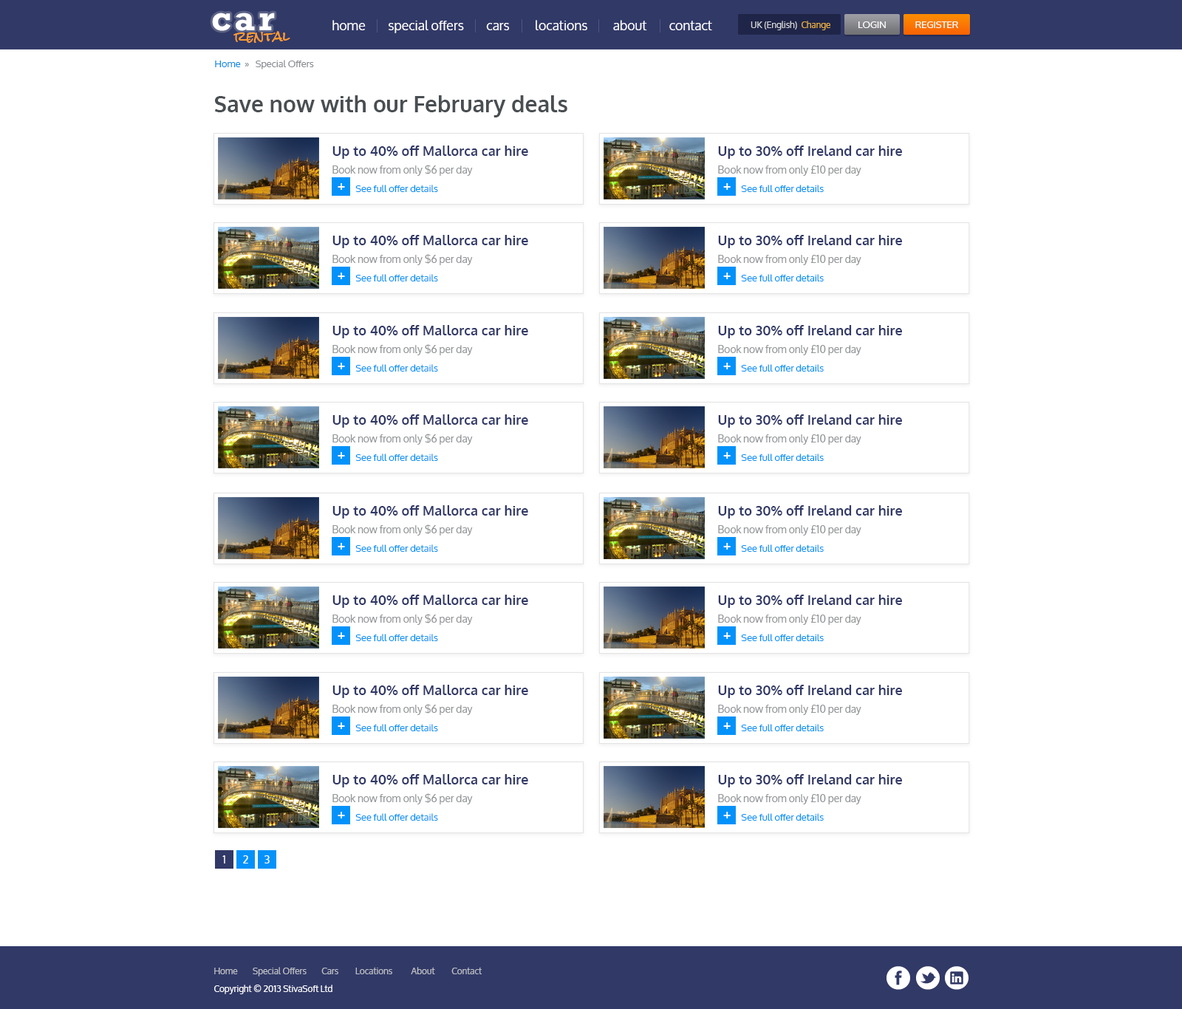
<style>
.page{position:relative;width:1182px;height:1009px;background:#ffffff}
.page>*{position:absolute;margin:0}
.t1{font:35.5px "Rockwell-Bold";letter-spacing:0.1em;color:#ffffff}
.t2{font:13.3px "Oxygen";color:#ffffff}
.t3{font:8.9px "Oxygen";color:#d4d4d7}
.t4{font:8.9px "Oxygen";color:#e7ae40}
.t5{font:9.6px "Oxygen";color:#ffffff;text-transform:uppercase}
.t6{font:13.3px "RockSalt";color:#ff9b2f}
.t7{font:9.6px "Oxygen";color:#888b91}
.t8{font:9.6px "Oxygen";color:#0e8be5}
.t9{font:22.2px "Oxygen-Bold";color:#494e52}
.t10{font:13.3px "Oxygen-Bold";color:#313967}
.t11{font:10.3px/17.7px "Oxygen";color:#939698}
.t12{font:13.3px "Oxygen-Bold";color:#ffffff}
.t13{font:9.6px "Oxygen";color:#0392fa}
.t14{font:10.3px "Oxygen";color:#ffffff}
.t15{font:8.9px "Oxygen";color:#bfc0c6}
.t16{font:8.9px/17.7px "Oxygen";color:#ffffff}
</style>
<div class="page">
<p class="t1" style="left:212px;top:13px;width:63px;height:18px">car</p>
<p class="t2" style="left:332px;top:20px;width:380px;height:13px">home        special offers        cars         locations         about        contact</p>
<p class="t3" style="left:750px;top:21px;width:80px;height:9px">UK (English)  <span class="t4">Change</span></p>
<p class="t5" style="left:858px;top:21px;width:28px;height:7px">Login</p>
<p class="t5" style="left:915px;top:21px;width:43px;height:7px">Register</p>
<p class="t6" style="left:233px;top:31px;width:57px;height:12px">rental</p>
<p class="t7" style="left:215px;top:60px;width:99px;height:9px"><span class="t8"> Home</span>  »   Special Offers</p>
<p class="t9" style="left:214px;top:95px;width:353px;height:22px">Save now with our February deals</p>
<p class="t10" style="left:332px;top:146px;width:196px;height:30px">Up to 40% off Mallorca car hire<br><span class="t11">Book now from only $6 per day</span></p>
<p class="t10" style="left:718px;top:146px;width:184px;height:30px">Up to 30% off Ireland car hire<br><span class="t11">Book now from only £10 per day</span></p>
<p class="t12" style="left:338px;top:183px;width:7px;height:7px">+</p>
<p class="t13" style="left:355px;top:185px;width:83px;height:7px">See full offer details</p>
<p class="t12" style="left:723px;top:183px;width:8px;height:7px">+</p>
<p class="t13" style="left:741px;top:185px;width:83px;height:7px">See full offer details</p>
<p class="t10" style="left:332px;top:235px;width:196px;height:30px">Up to 40% off Mallorca car hire<br><span class="t11">Book now from only $6 per day</span></p>
<p class="t10" style="left:718px;top:235px;width:184px;height:30px">Up to 30% off Ireland car hire<br><span class="t11">Book now from only £10 per day</span></p>
<p class="t12" style="left:338px;top:273px;width:7px;height:6px">+</p>
<p class="t13" style="left:355px;top:274px;width:83px;height:7px">See full offer details</p>
<p class="t12" style="left:723px;top:273px;width:8px;height:6px">+</p>
<p class="t13" style="left:741px;top:274px;width:83px;height:7px">See full offer details</p>
<p class="t10" style="left:332px;top:325px;width:196px;height:30px">Up to 40% off Mallorca car hire<br><span class="t11">Book now from only $6 per day</span></p>
<p class="t10" style="left:718px;top:325px;width:184px;height:30px">Up to 30% off Ireland car hire<br><span class="t11">Book now from only £10 per day</span></p>
<p class="t12" style="left:338px;top:363px;width:7px;height:6px">+</p>
<p class="t13" style="left:355px;top:364px;width:83px;height:8px">See full offer details</p>
<p class="t12" style="left:723px;top:363px;width:8px;height:6px">+</p>
<p class="t13" style="left:741px;top:364px;width:83px;height:8px">See full offer details</p>
<p class="t10" style="left:332px;top:414px;width:196px;height:31px">Up to 40% off Mallorca car hire<br><span class="t11">Book now from only $6 per day</span></p>
<p class="t10" style="left:718px;top:414px;width:184px;height:31px">Up to 30% off Ireland car hire<br><span class="t11">Book now from only £10 per day</span></p>
<p class="t12" style="left:338px;top:452px;width:7px;height:7px">+</p>
<p class="t13" style="left:355px;top:454px;width:83px;height:7px">See full offer details</p>
<p class="t12" style="left:723px;top:452px;width:8px;height:7px">+</p>
<p class="t13" style="left:741px;top:454px;width:83px;height:7px">See full offer details</p>
<p class="t10" style="left:332px;top:505px;width:196px;height:31px">Up to 40% off Mallorca car hire<br><span class="t11">Book now from only $6 per day</span></p>
<p class="t10" style="left:718px;top:505px;width:184px;height:31px">Up to 30% off Ireland car hire<br><span class="t11">Book now from only £10 per day</span></p>
<p class="t12" style="left:338px;top:543px;width:7px;height:7px">+</p>
<p class="t13" style="left:355px;top:544px;width:83px;height:8px">See full offer details</p>
<p class="t12" style="left:723px;top:543px;width:8px;height:7px">+</p>
<p class="t13" style="left:741px;top:544px;width:83px;height:8px">See full offer details</p>
<p class="t10" style="left:332px;top:595px;width:196px;height:30px">Up to 40% off Mallorca car hire<br><span class="t11">Book now from only $6 per day</span></p>
<p class="t10" style="left:718px;top:595px;width:184px;height:30px">Up to 30% off Ireland car hire<br><span class="t11">Book now from only £10 per day</span></p>
<p class="t12" style="left:338px;top:632px;width:7px;height:7px">+</p>
<p class="t13" style="left:355px;top:634px;width:83px;height:7px">See full offer details</p>
<p class="t12" style="left:723px;top:632px;width:8px;height:7px">+</p>
<p class="t13" style="left:741px;top:634px;width:83px;height:7px">See full offer details</p>
<p class="t10" style="left:332px;top:685px;width:196px;height:30px">Up to 40% off Mallorca car hire<br><span class="t11">Book now from only $6 per day</span></p>
<p class="t10" style="left:718px;top:685px;width:184px;height:30px">Up to 30% off Ireland car hire<br><span class="t11">Book now from only £10 per day</span></p>
<p class="t12" style="left:338px;top:722px;width:7px;height:7px">+</p>
<p class="t13" style="left:355px;top:724px;width:83px;height:7px">See full offer details</p>
<p class="t12" style="left:723px;top:722px;width:8px;height:7px">+</p>
<p class="t13" style="left:741px;top:724px;width:83px;height:7px">See full offer details</p>
<p class="t10" style="left:332px;top:774px;width:196px;height:30px">Up to 40% off Mallorca car hire<br><span class="t11">Book now from only $6 per day</span></p>
<p class="t10" style="left:718px;top:774px;width:184px;height:30px">Up to 30% off Ireland car hire<br><span class="t11">Book now from only £10 per day</span></p>
<p class="t12" style="left:338px;top:812px;width:7px;height:6px">+</p>
<p class="t13" style="left:355px;top:813px;width:83px;height:8px">See full offer details</p>
<p class="t12" style="left:723px;top:812px;width:8px;height:6px">+</p>
<p class="t13" style="left:741px;top:813px;width:83px;height:8px">See full offer details</p>
<p class="t14" style="left:222px;top:855px;width:3px;height:8px">1</p>
<p class="t14" style="left:243px;top:855px;width:5px;height:8px">2</p>
<p class="t14" style="left:264px;top:855px;width:6px;height:8px">3</p>
<p class="t15" style="left:214px;top:967px;width:268px;height:27px">Home        Special Offers        Cars         Locations          About         Contact<br><span class="t16">Copyright © 2013 StivaSoft Ltd</span></p>
</div>
